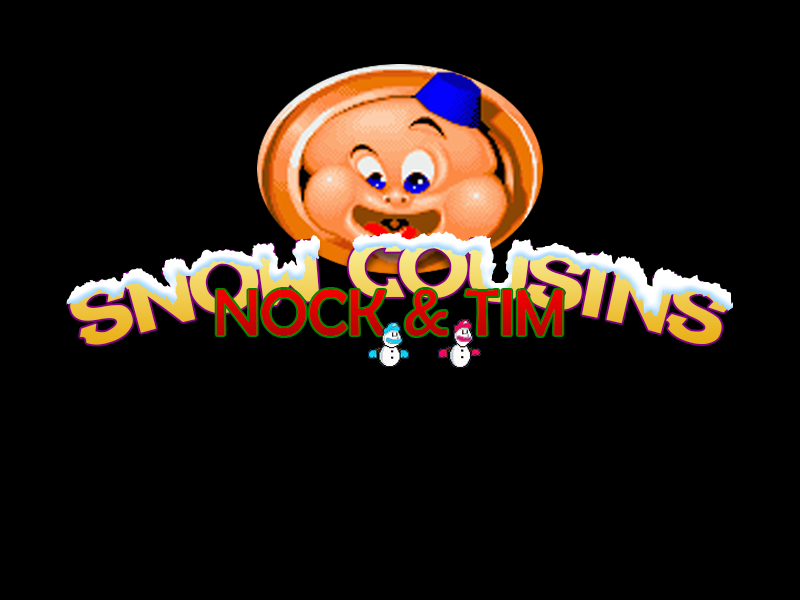
<style>
.page{position:relative;width:800px;height:600px;background:#000000}
.page>*{position:absolute;margin:0}
.t1{font:92.5px "ARCADE"}
.t2{font:66px "BerlinSansFB-Reg"}
</style>
<div class="page">
<p class="t1" style="left:70px;top:236px;width:660px;height:109px">SNOW COUSINS</p>
<p class="t2" style="left:216px;top:289px;width:347px;height:47px">NOCK &amp; TIM</p>
</div>
